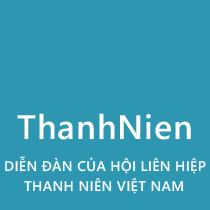
<style>
.page{position:relative;width:210px;height:210px;background:#2d97b1}
.page>*{position:absolute;margin:0}
.t1{font:34px "SegoeWP-Semibold";letter-spacing:0.025em;color:#ffffff}
.t2{font:14px "SegoeWP-Semibold";letter-spacing:0.025em;color:#fefefe}
</style>
<div class="page">
<p class="t1" style="left:17px;top:113px;width:174px;height:27px">ThanhNien</p>
<p class="t2" style="left:5px;top:156px;width:201px;height:18px">DIỄN ĐÀN CỦA HỘI LIÊN HIỆP</p>
<p class="t2" style="left:24px;top:177px;width:160px;height:17px">THANH NIÊN VIỆT NAM</p>
</div>
